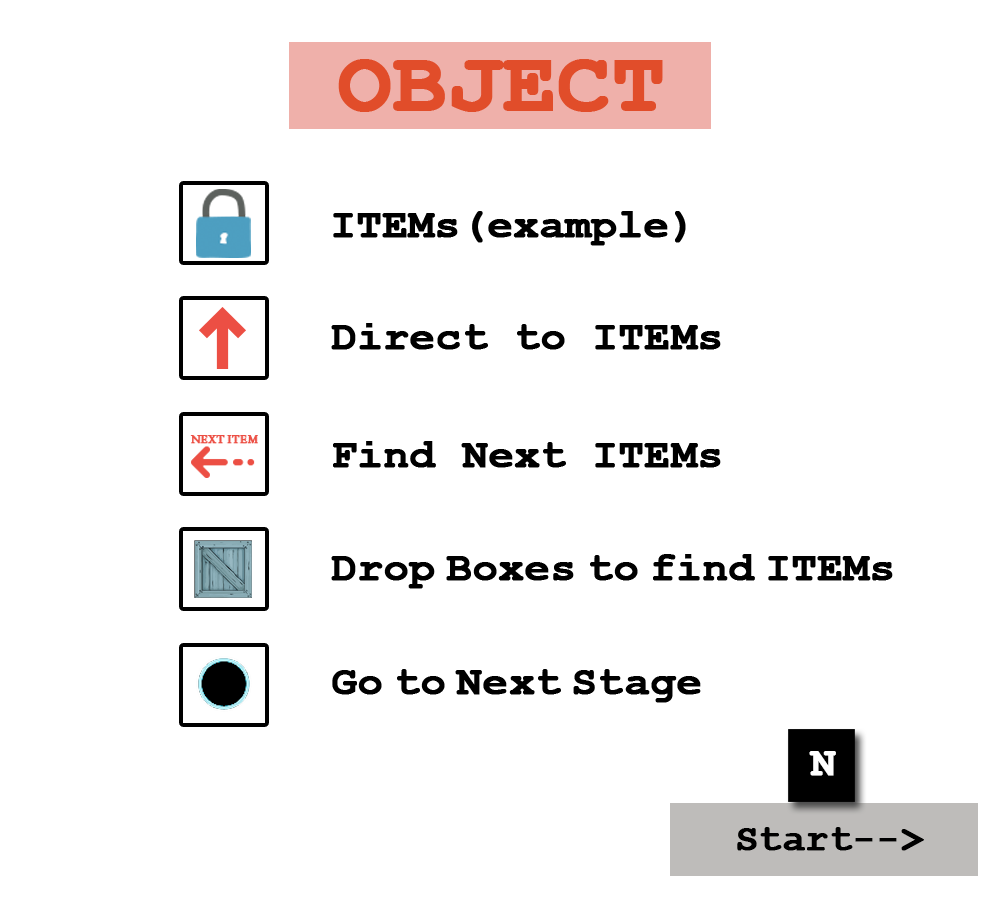
<style>
.page{position:relative;width:1000px;height:900px;background:#ffffff}
.page>*{position:absolute;margin:0}
.t1{font:87.5px "CourierNewPS-BoldMT";color:#e14d2a;font-weight:bold}
.t2{font:41.7px "CourierNewPS-BoldMT";color:#000000;font-weight:bold}
.t3{font:41.7px "CourierNewPS-BoldMT";color:#fefefe;font-weight:bold}
.t4{font:37.5px "CourierNewPS-BoldMT";color:#000000;font-weight:bold}
</style>
<div class="page">
<p class="t1" style="left:338px;top:59px;width:325px;height:53px">OBJECT</p>
<p class="t2" style="left:333px;top:211px;width:353px;height:35px">ITEMs(example)</p>
<p class="t2" style="left:331px;top:323px;width:390px;height:27px">Direct to ITEMs</p>
<p class="t2" style="left:333px;top:441px;width:388px;height:27px">Find Next ITEMs</p>
<p class="t2" style="left:331px;top:554px;width:562px;height:35px">Drop Boxes to find ITEMs</p>
<p class="t2" style="left:332px;top:669px;width:369px;height:34px">Go to Next Stage</p>
<p class="t3" style="left:809px;top:751px;width:27px;height:25px">N</p>
<p class="t4" style="left:737px;top:827px;width:187px;height:24px">Start--&gt;</p>
</div>
